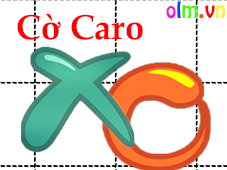
<style>
.page{position:relative;width:227px;height:170px;background:#ffffff}
.page>*{position:absolute;margin:0}
.t1{font:19.6px "VNI-Hobo";color:#fe0ed4}
.t2{font:19.6px "VNI-Hobo";color:#0e3bfe}
.t3{font:19.6px "VNI-Hobo";color:#46fe0e}
.t4{font:19.6px "VNI-Hobo";color:#fe520e}
.t5{font:19.6px "VNI-Hobo";color:#fc0303}
.t6{font:19.6px "VNI-Hobo";color:#f8fb20}
.t7{font:34.4px "PalatinoLinotype-Bold";color:#ff0000}
</style>
<div class="page">
<p class="t1" style="left:166px;top:1px;width:59px;height:18px">o<span class="t2">l</span><span class="t3">m</span><span class="t4">.</span><span class="t5">v</span><span class="t6">n</span></p>
<p class="t7" style="left:17px;top:13px;width:126px;height:27px">Cờ Caro</p>
</div>
